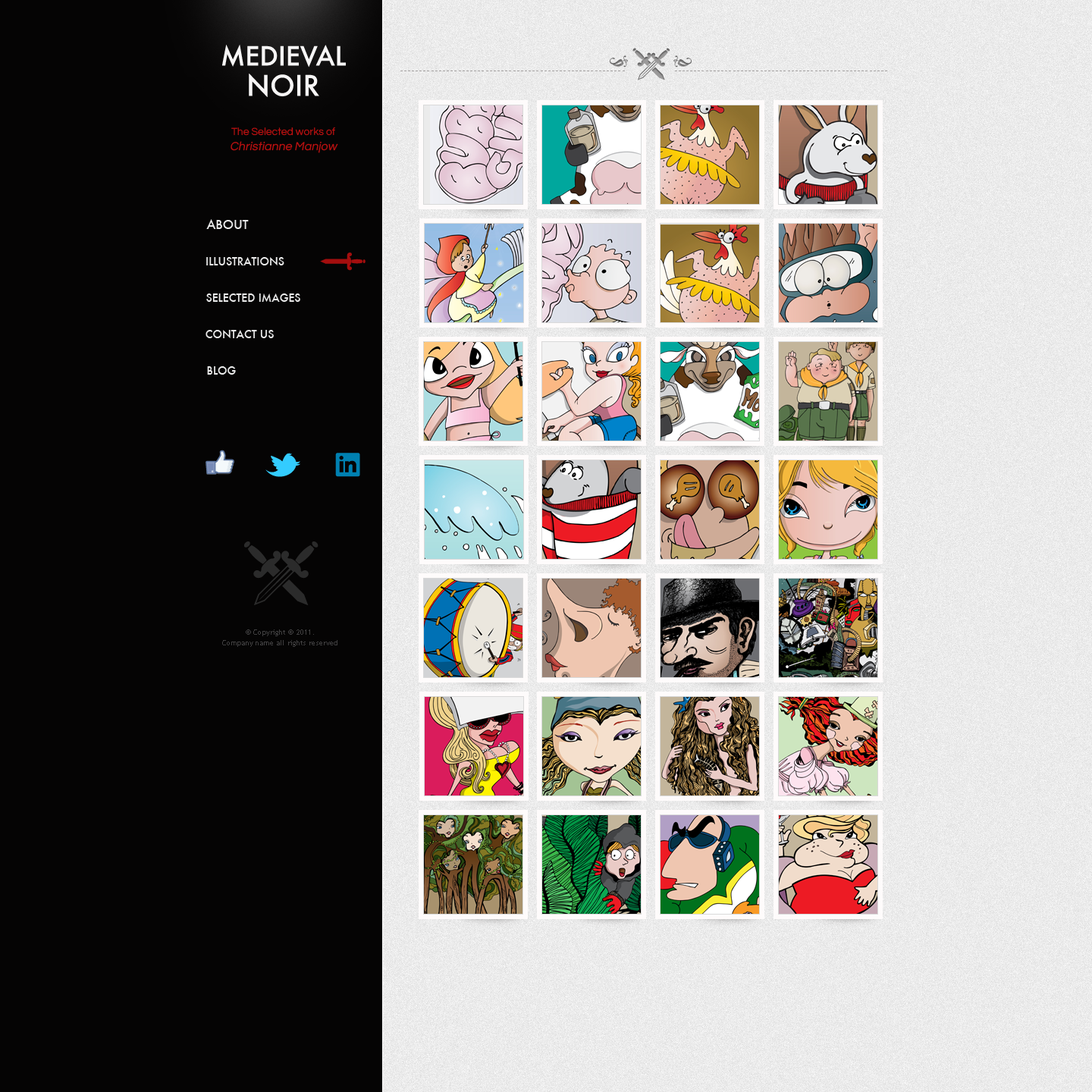
<style>
.page{position:relative;width:1092px;height:1092px;background:#050404}
.page>*{position:absolute;margin:0}
.t1{font:10.6px "TrebuchetMS";color:#a29f9f}
.t2{font:10.6px/15.2px "Questrial-Regular";color:#be1010}
.t3{font:12.1px/15.2px "Questrial-Regular";color:#be1010;font-style:italic}
.t4{font:12.1px "Futura-Medium";color:#ebebeb;text-transform:uppercase}
.t5{font:10.6px "Futura-Medium";color:#ebebeb;text-transform:uppercase}
.t6{font:7.6px/10.6px "TrebuchetMS";color:#403f40}
</style>
<div class="page">
<p class="t1" style="left:400px;top:71px;width:225px;height:0px">----------------------------------------------------------</p>
<p class="t1" style="left:675px;top:71px;width:212px;height:0px">-------------------------------------------------------</p>
<p class="t2" style="left:231px;top:127px;width:107px;height:26px;text-align:center">The Selected works of<br><span class="t3">Christianne Manjow</span></p>
<p class="t4" style="left:206px;top:219px;width:43px;height:10px">About</p>
<p class="t5" style="left:206px;top:257px;width:78px;height:8px">illustrations</p>
<p class="t5" style="left:206px;top:293px;width:94px;height:9px">selected images</p>
<p class="t5" style="left:206px;top:330px;width:68px;height:8px">contact us</p>
<p class="t5" style="left:207px;top:366px;width:29px;height:9px">Blog</p>
<p class="t6" style="left:222px;top:629px;width:115px;height:18px;text-align:center">© Copyright © 2011.<br>Company name all rights reserved</p>
</div>
